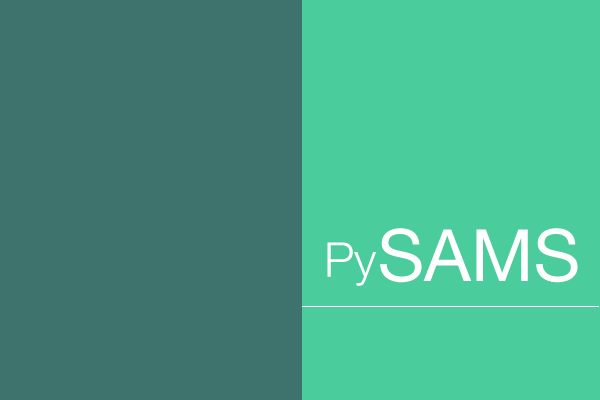
<style>
.page{position:relative;width:600px;height:400px;background:#3d736c}
.page>*{position:absolute;margin:0}
.t1{font:72px "HelveticaNeue";color:#ffffff}
.t2{font:48px "HelveticaNeue-Light";color:#ffffff}
</style>
<div class="page">
<p class="t1" style="left:380px;top:228px;width:198px;height:55px">SAMS</p>
<p class="t2" style="left:327px;top:242px;width:50px;height:44px">Py</p>
</div>
